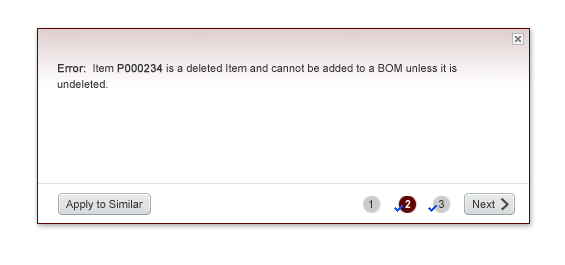
<style>
.page{position:relative;width:565px;height:265px;background:#ffffff}
.page>*{position:absolute;margin:0}
.t1{font:11px/16px "ArialMT";color:#333333}
.t2{font:11px/16px "ArialMT";color:#333333;font-weight:bold}
.t3{font:11px "ArialMT";color:#333333}
.t4{font:11px "ArialMT";letter-spacing:0.005em;color:#333333}
</style>
<div class="page">
<p class="t1" style="left:57px;top:64px;width:400px;height:24px"><span class="t2">Error:</span>  Item <span class="t2">P000234</span> is a deleted Item and cannot be added to a BOM unless it is <br>undeleted.</p>
<p class="t3" style="left:66px;top:200px;width:77px;height:11px">Apply to Similar</p>
<p class="t3" style="left:439px;top:200px;width:5px;height:8px">3</p>
<p class="t4" style="left:473px;top:200px;width:22px;height:8px">Next</p>
</div>
